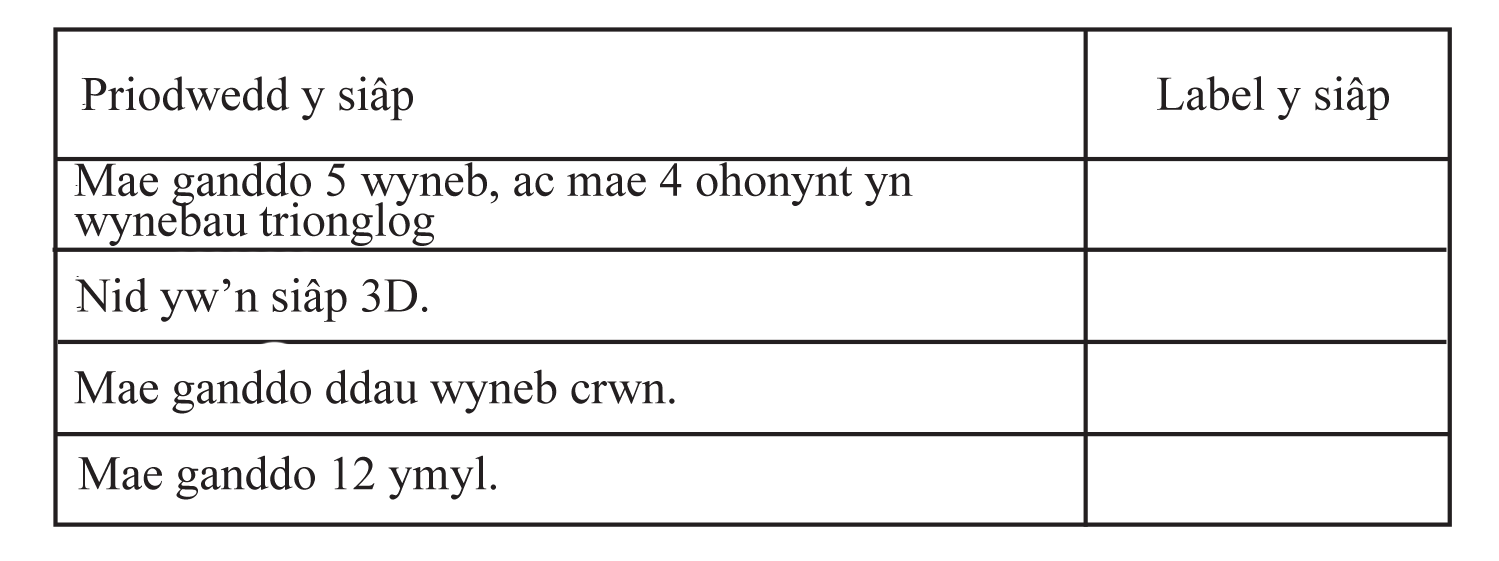
<style>
.page{position:relative;width:1499px;height:561px;background:#ffffff}
.page>*{position:absolute;margin:0}
.t1{font:48px "TimesNewRomanPSMT";color:#231f20}
.t2{font:48px/40px "TimesNewRomanPSMT";color:#231f20}
</style>
<div class="page">
<p class="t1" style="left:81px;top:76px;width:332px;height:45px">Priodwedd y siâp</p>
<p class="t1" style="left:1157px;top:76px;width:232px;height:44px">Label y siâp</p>
<p class="t2" style="left:74px;top:162px;width:839px;height:84px">Mae ganddo 5 wyneb, ac mae 4 ohonynt yn <br>wynebau trionglog</p>
<p class="t1" style="left:75px;top:278px;width:353px;height:44px">Nid yw’n siâp 3D.</p>
<p class="t1" style="left:74px;top:369px;width:601px;height:45px">Mae ganddo ddau wyneb crwn.</p>
<p class="t1" style="left:78px;top:455px;width:418px;height:45px">Mae ganddo 12 ymyl.</p>
</div>
